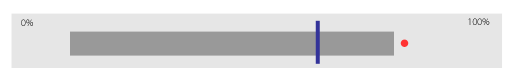
<style>
.page{position:relative;width:514px;height:77px;background:#e6e6e6}
.page>*{position:absolute;margin:0}
.t1{font:10px "MyriadPro-Light"}
</style>
<div class="page">
<p class="t1" style="left:21px;top:19px;width:12px;height:7px">0%</p>
<p class="t1" style="left:468px;top:18px;width:22px;height:7px">100%</p>
</div>
